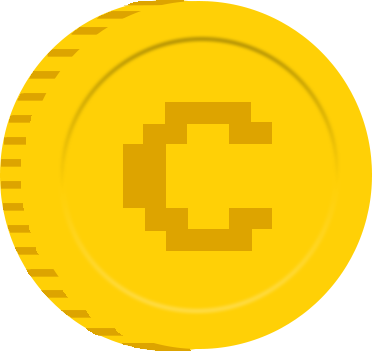
<style>
.page{position:relative;width:372px;height:351px;background:#ffd006}
.page>*{position:absolute;margin:0}
.t1{font:300px "ArcadeClassic";color:#dda400}
</style>
<div class="page">
<p class="t1" style="left:123px;top:102px;width:149px;height:149px">C</p>
</div>
